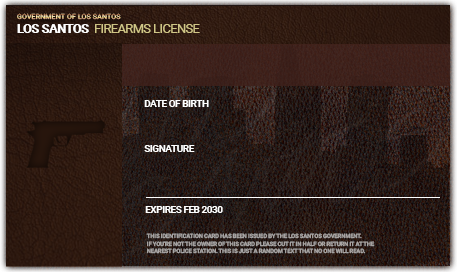
<style>
.page{position:relative;width:457px;height:272px}
.page>*{position:absolute;margin:0}
.t1{font:7px "Roboto-Regular";letter-spacing:0.025em}
.t2{font:12.6px "Roboto-Regular";letter-spacing:-0.035em;color:#d0c686}
.t3{font:12.6px "Roboto-Black";letter-spacing:-0.035em;color:#ffffff}
.t4{font:9.8px "Roboto-Bold";letter-spacing:-0.035em;color:#ffffff}
.t5{font:6px "Roboto-Bold";letter-spacing:-0.035em;color:#aaa7a6}
</style>
<div class="page">
<p class="t1" style="left:17px;top:13px;width:104px;height:7px">GOVERNMENT OF LOS SANTOS</p>
<p class="t2" style="left:17px;top:24px;width:183px;height:9px"><span class="t3">LOS SANTOS  </span>FIREARMS LICENSE</p>
<p class="t4" style="left:144px;top:100px;width:65px;height:7px">DATE OF BIRTH</p>
<p class="t4" style="left:144px;top:145px;width:51px;height:7px">SIGNATURE</p>
<p class="t4" style="left:145px;top:206px;width:78px;height:7px">EXPIRES FEB 2030</p>
<p class="t5" style="left:146px;top:233px;width:229px;height:21px">THIS IDENTIFICATION CARD HAS BEEN ISSUED BY THE LOS SANTOS GOVERNMENT. <br>IF YOU’RE NOT THE OWNER OF THIS CARD PLEASE CUT IT IN HALF OR RETURN IT AT THE <br>NEAREST POLICE STATION. THIS IS JUST A RANDOM TEXT THAT NO ONE WILL READ.</p>
</div>
